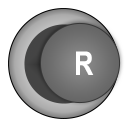
<style>
.page{position:relative;width:128px;height:128px;background:#ffffff}
.page>*{position:absolute;margin:0}
.t1{font:33.1px "ArialNarrow-Bold";color:#ffffff}
</style>
<div class="page">
<p class="t1" style="left:76px;top:51px;width:18px;height:24px">R</p>
</div>
